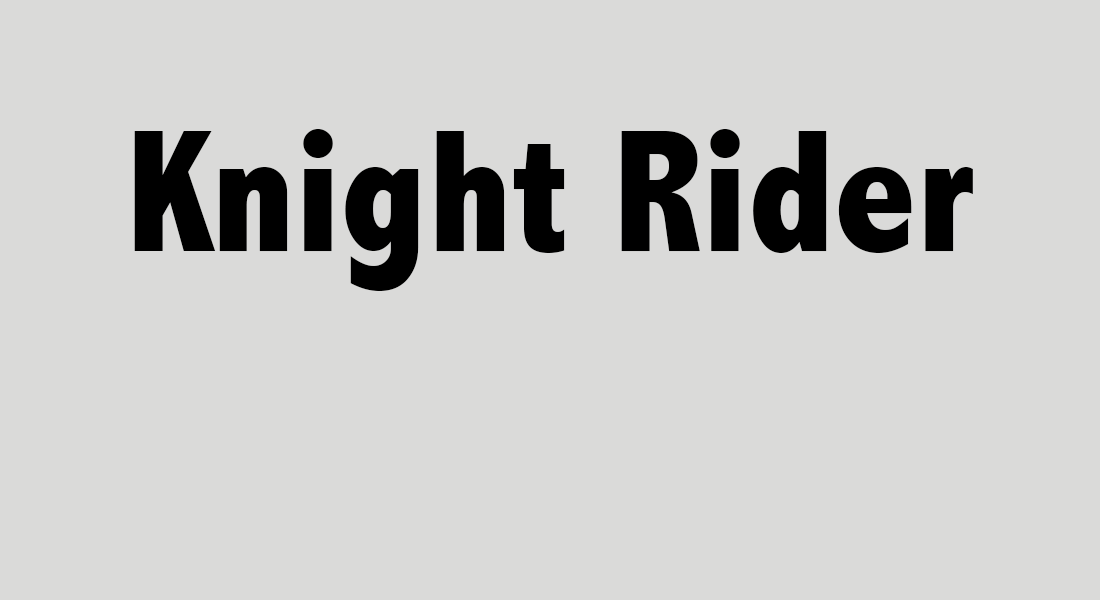
<style>
.page{position:relative;width:1100px;height:600px;background:#dadad9}
.page>*{position:absolute;margin:0}
.t1{font:176.2px "AbadiMT-CondensedExtraBold";color:#000000}
</style>
<div class="page">
<p class="t1" style="left:134px;top:129px;width:839px;height:162px">Knight Rider</p>
</div>
